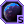
<style>
.page{position:relative;width:24px;height:24px}
.page>*{position:absolute;margin:0}
.t1{font:9px "Montserrat-Bold";color:#000000}
</style>
<div class="page">
<p class="t1" style="left:18px;top:16px;width:6px;height:7px">S</p>
</div>
